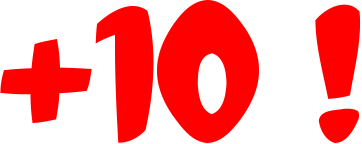
<style>
.page{position:relative;width:362px;height:144px;background:#ffffff}
.page>*{position:absolute;margin:0}
.t1{font:171px "DCC-Dreamer";color:#ff0000}
</style>
<div class="page">
<p class="t1" style="left:0px;top:0px;width:361px;height:143px">+10 !</p>
</div>
